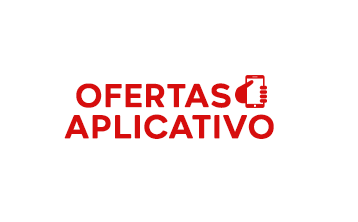
<style>
.page{position:relative;width:358px;height:222px;background:#ffffff}
.page>*{position:absolute;margin:0}
.t1{font:31.7px "AftikaSoft-Bold";color:#d60d0d;font-weight:bold}
</style>
<div class="page">
<p class="t1" style="left:76px;top:83px;width:155px;height:25px">OFERTAS</p>
<p class="t1" style="left:64px;top:114px;width:210px;height:25px">APLICATIVO</p>
</div>
